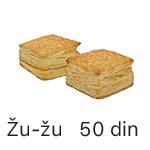
<style>
.page{position:relative;width:150px;height:150px;background:#ffffff}
.page>*{position:absolute;margin:0}
.t1{font:20px "SFProText-Regular";color:#201e1f}
</style>
<div class="page">
<p class="t1" style="left:7px;top:117px;width:131px;height:20px">Žu-žu   50 din</p>
</div>
